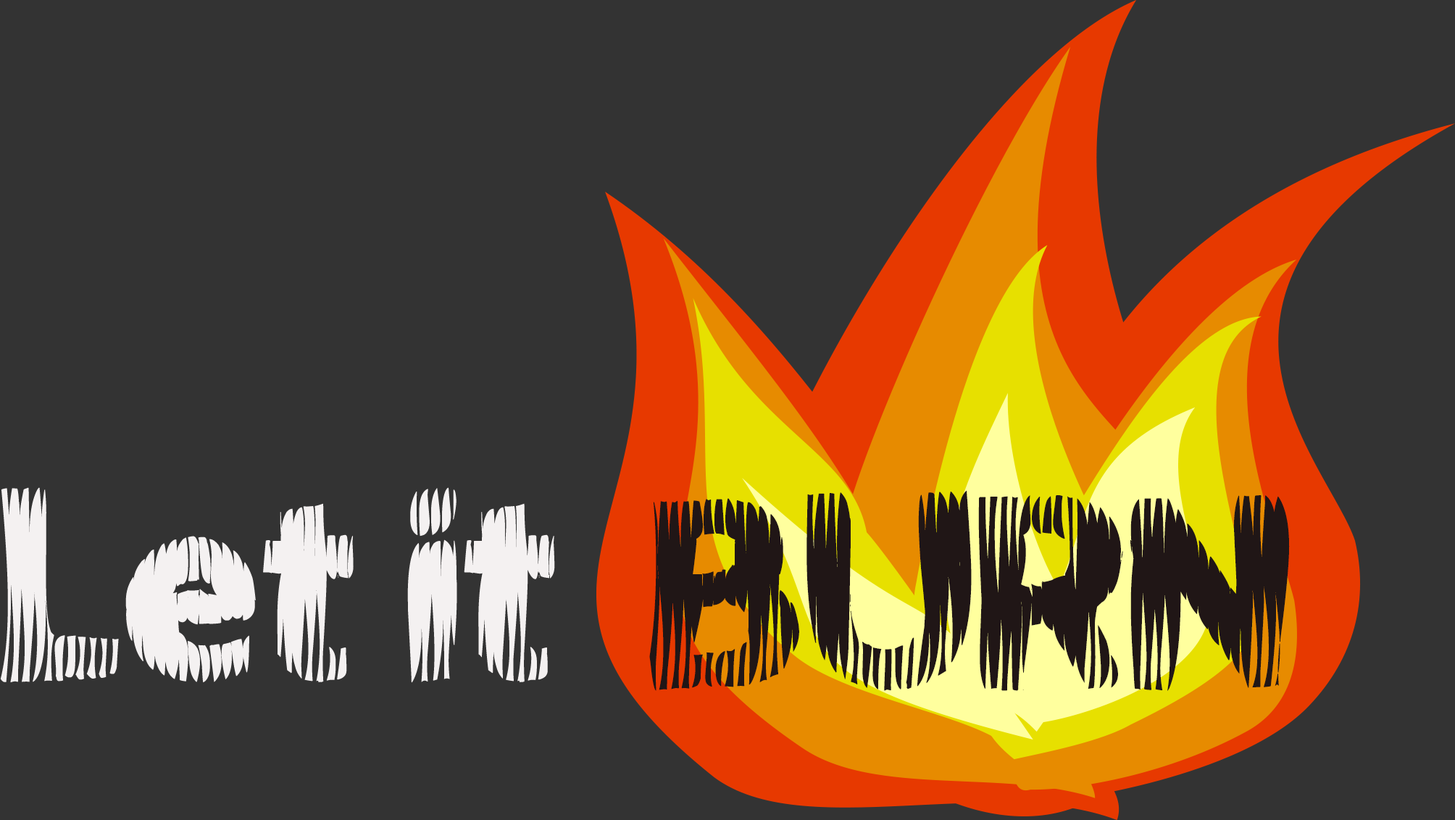
<style>
.page{position:relative;width:1455px;height:820px;background:#333333}
.page>*{position:absolute;margin:0}
.t1{font:259.3px "FireBlock";color:#f4f1f1}
.t2{font:259.3px "FireBlock";color:#201616}
</style>
<div class="page">
<p class="t1" style="left:0px;top:487px;width:555px;height:196px">Let it</p>
<p class="t2" style="left:649px;top:490px;width:641px;height:201px">BURN</p>
</div>
